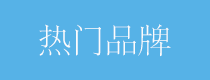
<style>
.page{position:relative;width:210px;height:80px;background:#56b2e7}
.page>*{position:absolute;margin:0}
.t1{font:33.3px "FZSYJW--GB1-0";color:#fcfcfc}
</style>
<div class="page">
<p class="t1" style="left:39px;top:24px;width:132px;height:33px">热门品牌</p>
</div>
